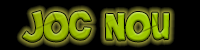
<style>
.page{position:relative;width:200px;height:50px;background:#000000}
.page>*{position:absolute;margin:0}
.t1{font:50px "Brady-Bunch"}
</style>
<div class="page">
<p class="t1" style="left:22px;top:11px;width:147px;height:31px">Joc Nou</p>
</div>
